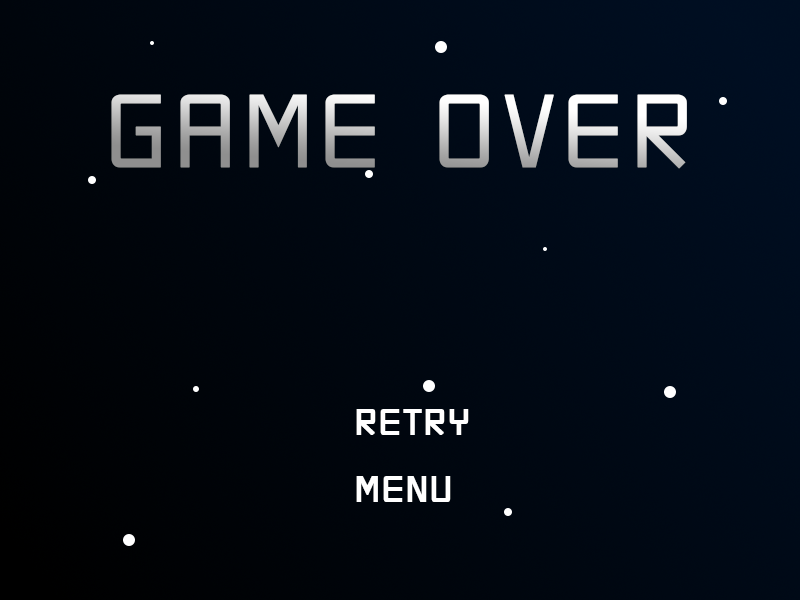
<style>
.page{position:relative;width:800px;height:600px}
.page>*{position:absolute;margin:0}
.t1{font:161.2px "2006iannnnnISO";font-weight:bold}
.t2{font:56.1px "2006iannnnnISO";color:#ffffff;font-weight:bold}
</style>
<div class="page">
<p class="t1" style="left:111px;top:94px;width:576px;height:75px">GAME OVER</p>
<p class="t2" style="left:356px;top:409px;width:113px;height:93px">RETRY<br>MENU</p>
</div>
